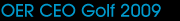
<style>
.page{position:relative;width:180px;height:21px;background:#000000}
.page>*{position:absolute;margin:0}
.t1{font:18px "AvantGardeITCbyBT-Medium";color:#0099cc}
</style>
<div class="page">
<p class="t1" style="left:1px;top:3px;width:160px;height:14px">OER CEO Golf 2009</p>
</div>
